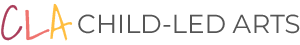
<style>
.page{position:relative;width:300px;height:45px;background:#ffffff}
.page>*{position:absolute;margin:0}
.t1{font:48px "ShadowsIntoLight";color:#ab3e5b}
.t2{font:48px "ShadowsIntoLight";color:#ef746f}
.t3{font:48px "ShadowsIntoLight";color:#ffbe40}
.t4{font:26px "Montserrat-Regular";color:#555555}
</style>
<div class="page">
<p class="t1" style="left:1px;top:3px;width:72px;height:38px">C<span class="t2">L</span><span class="t3">A</span></p>
<p class="t4" style="left:78px;top:14px;width:222px;height:20px">CHILD-LED ARTS</p>
</div>
